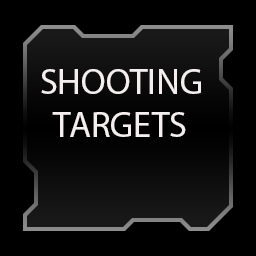
<style>
.page{position:relative;width:256px;height:256px;background:#000000}
.page>*{position:absolute;margin:0}
.t1{font:36px "MyriadPro-Regular";color:#f4eeee}
</style>
<div class="page">
<p class="t1" style="left:41px;top:69px;width:160px;height:68px">SHOOTING<br>   TARGETS</p>
</div>
